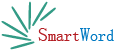
<style>
.page{position:relative;width:120px;height:50px;background:#ffffff}
.page>*{position:absolute;margin:0}
.t1{font:16px "LiSu";color:#b41d23}
.t2{font:20px "LiSu";color:#b41d23}
.t3{font:20px "LiSu";color:#0079c2}
.t4{font:16px "LiSu";color:#0079c2}
</style>
<div class="page">
<p class="t1" style="left:38px;top:28px;width:76px;height:13px"><span class="t2">S</span>mart<span class="t3">W</span><span class="t4">ord</span></p>
</div>
